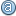
<style>
.page{position:relative;width:16px;height:16px;background:#ffffff}
.page>*{position:absolute;margin:0}
.t1{font:14px "ArialMT";color:#ffffff}
</style>
<div class="page">
<p class="t1" style="left:5px;top:3px;width:6px;height:8px">a</p>
</div>
